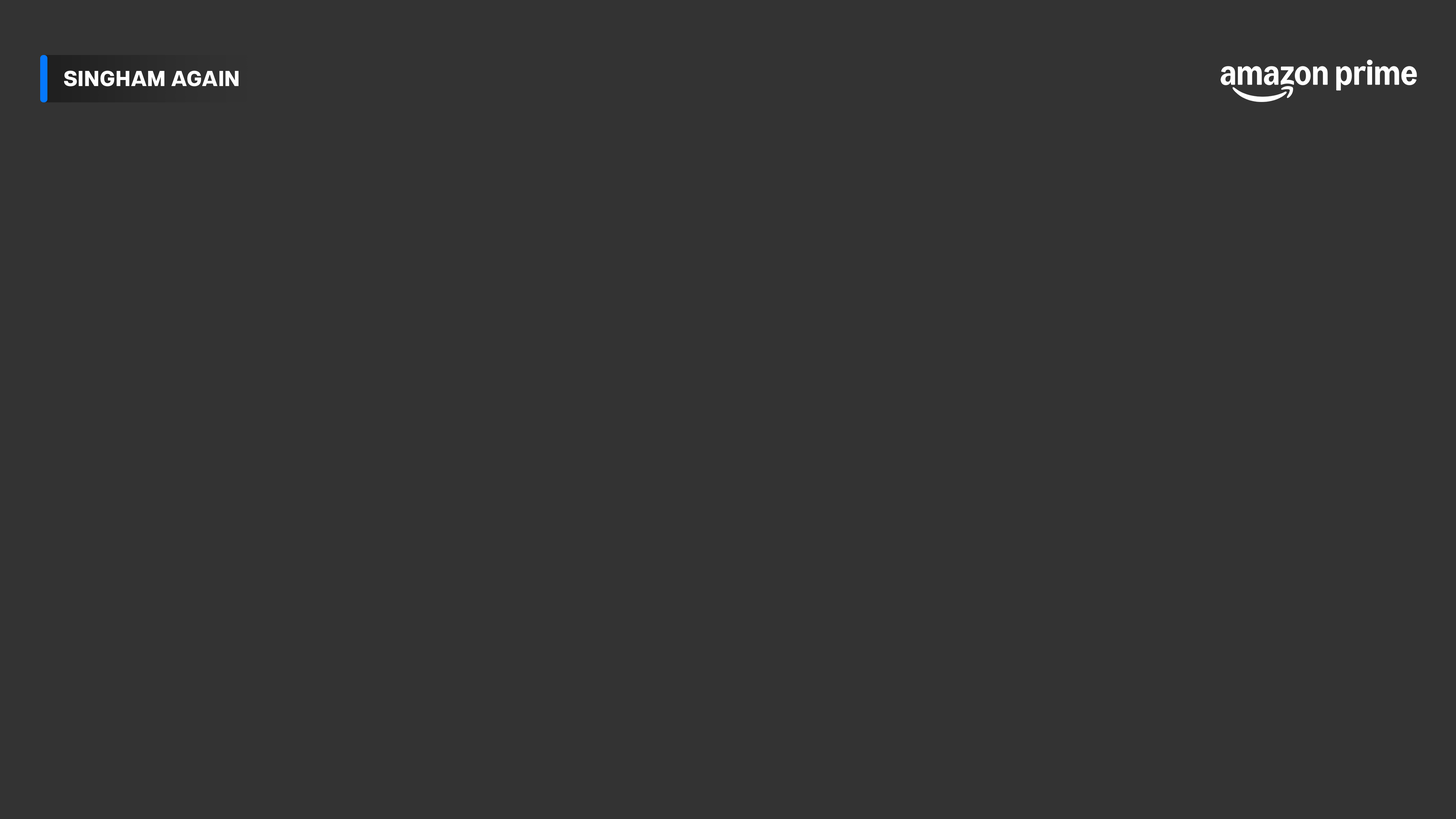
<style>
.page{position:relative;width:1456px;height:819px;background:#333333}
.page>*{position:absolute;margin:0}
.t1{font:21.7px "ArticulatCF-ExtraBold";letter-spacing:0.01em;color:#ffffff;text-transform:uppercase}
</style>
<div class="page">
<p class="t1" style="left:64px;top:71px;width:174px;height:15px">Singham Again</p>
</div>
